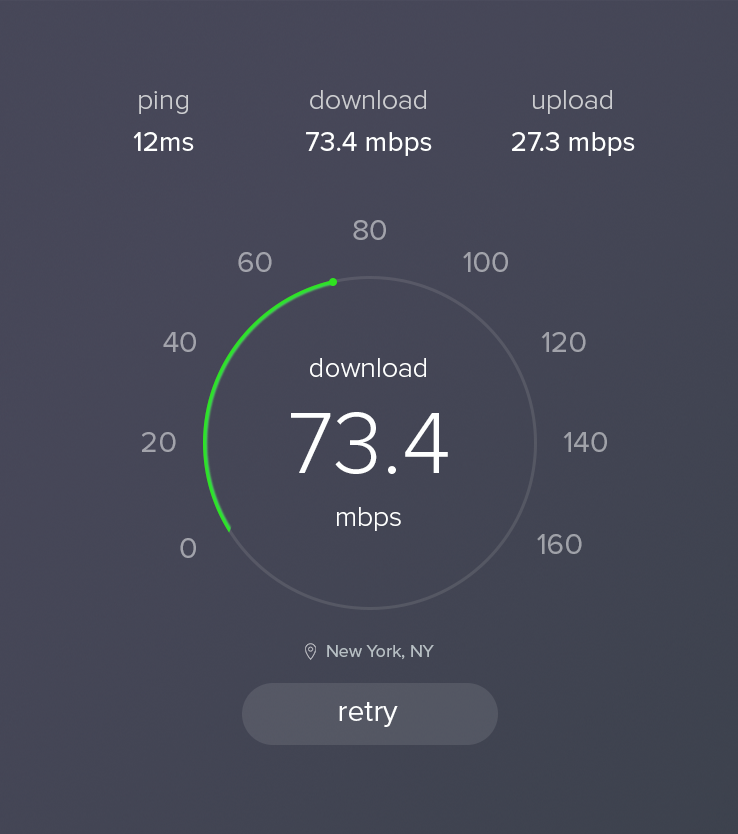
<style>
.page{position:relative;width:738px;height:834px}
.page>*{position:absolute;margin:0}
.t1{font:28px "ProximaNova-Light";color:#cccdd0}
.t2{font:28px "ProximaNova-Light";color:#cbccd0}
.t3{font:28px "ProximaNova-Regular";color:#feffff}
.t4{font:30px "ProximaNova-Regular";color:#a2a3ab}
.t5{font:30px "ProximaNova-Regular";color:#a2a3ac}
.t6{font:30px "ProximaNova-Regular";color:#a1a2aa}
.t7{font:28px "ProximaNova-Light";color:#feffff}
.t8{font:90px "ProximaNova-Light";color:#feffff}
.t9{font:30px "ProximaNova-Regular";color:#a0a2a9}
.t10{font:18px "ProximaNova-Regular";color:#b7bfc4}
.t11{font:30px "ProximaNova-Regular";color:#feffff}
</style>
<div class="page">
<p class="t1" style="left:139px;top:91px;width:49px;height:23px">ping</p>
<p class="t1" style="left:310px;top:90px;width:116px;height:19px">download</p>
<p class="t2" style="left:533px;top:90px;width:79px;height:24px">upload</p>
<p class="t3" style="left:133px;top:132px;width:61px;height:19px">12ms</p>
<p class="t3" style="left:306px;top:132px;width:126px;height:24px">73.4 mbps</p>
<p class="t3" style="left:512px;top:132px;width:123px;height:24px">27.3 mbps</p>
<p class="t4" style="left:353px;top:220px;width:33px;height:20px">80</p>
<p class="t5" style="left:238px;top:252px;width:34px;height:20px">60</p>
<p class="t4" style="left:463px;top:252px;width:45px;height:20px">100</p>
<p class="t5" style="left:163px;top:332px;width:33px;height:20px">40</p>
<p class="t6" style="left:541px;top:332px;width:45px;height:20px">120</p>
<p class="t7" style="left:310px;top:358px;width:116px;height:19px">download</p>
<p class="t8" style="left:291px;top:412px;width:157px;height:62px">73.4</p>
<p class="t4" style="left:142px;top:432px;width:34px;height:20px">20</p>
<p class="t9" style="left:563px;top:432px;width:44px;height:20px">140</p>
<p class="t7" style="left:337px;top:507px;width:64px;height:24px">mbps</p>
<p class="t9" style="left:537px;top:534px;width:45px;height:20px">160</p>
<p class="t4" style="left:180px;top:538px;width:16px;height:20px">0</p>
<p class="t10" style="left:327px;top:645px;width:107px;height:15px">New York, NY</p>
<p class="t11" style="left:339px;top:702px;width:59px;height:25px">retry</p>
</div>
